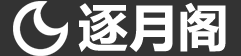
<style>
.page{position:relative;width:241px;height:56px;background:#333333}
.page>*{position:absolute;margin:0}
.t1{font:50px "MicrosoftYaHei-Bold";color:#ffffff}
</style>
<div class="page">
<p class="t1" style="left:78px;top:2px;width:148px;height:50px">逐月阁</p>
</div>
